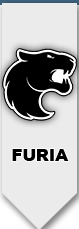
<style>
.page{position:relative;width:79px;height:229px;background:#ebebeb}
.page>*{position:absolute;margin:0}
.t1{font:16.7px "Arial-Black";letter-spacing:-0.01em;color:#000000}
</style>
<div class="page">
<p class="t1" style="left:12px;top:149px;width:57px;height:12px">FURIA</p>
</div>
